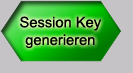
<style>
.page{position:relative;width:133px;height:73px;background:#c6c3c6}
.page>*{position:absolute;margin:0}
.t1{font:14.7px "ArialMT";color:#000000}
</style>
<div class="page">
<p class="t1" style="left:20px;top:16px;width:81px;height:33px;text-align:center">Session Key<br>generieren</p>
</div>
